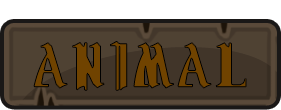
<style>
.page{position:relative;width:281px;height:110px}
.page>*{position:absolute;margin:0}
.t1{font:65px "Hangyaku";letter-spacing:0.1em;color:#704300;font-weight:bold}
</style>
<div class="page">
<p class="t1" style="left:33px;top:41px;width:214px;height:50px">ANIMAL</p>
</div>
